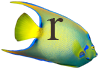
<style>
.page{position:relative;width:100px;height:69px;background:#ffffff}
.page>*{position:absolute;margin:0}
.t1{font:48px "TimesNewRomanPSMT";color:#3d322d}
</style>
<div class="page">
<p class="t1" style="left:47px;top:18px;width:17px;height:22px">r</p>
</div>
